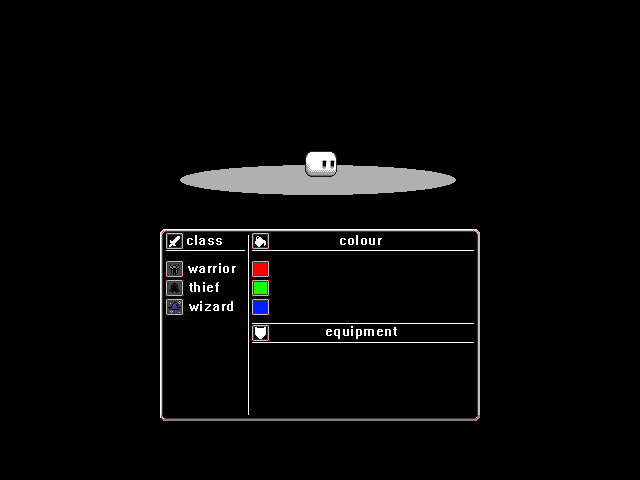
<style>
.page{position:relative;width:640px;height:480px;background:#000000}
.page>*{position:absolute;margin:0}
.t1{font:10px "System";letter-spacing:0.05em;color:#ffffff}
</style>
<div class="page">
<p class="t1" style="left:188px;top:263px;width:48px;height:10px">warrior</p>
<p class="t1" style="left:189px;top:282px;width:30px;height:10px">thief</p>
<p class="t1" style="left:189px;top:301px;width:44px;height:10px">wizard</p>
</div>
